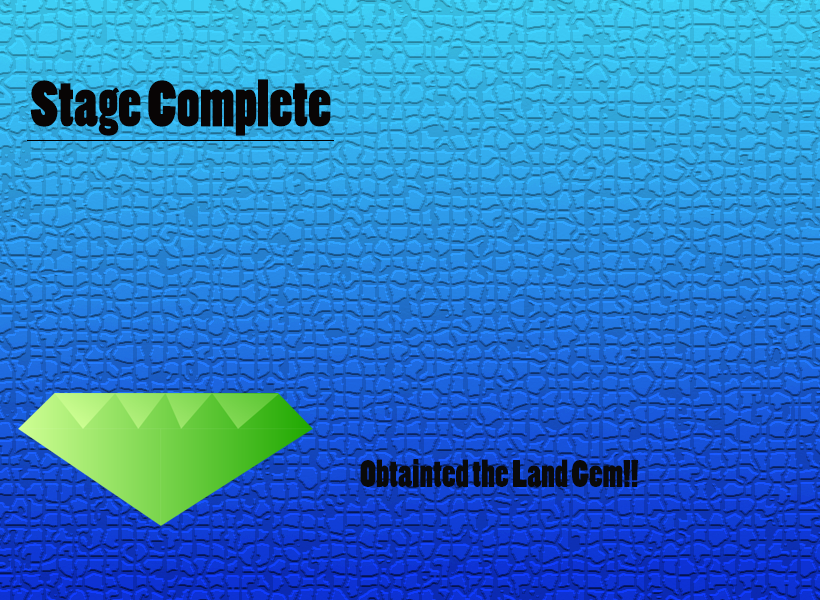
<style>
.page{position:relative;width:820px;height:600px}
.page>*{position:absolute;margin:0}
.t1{font:61.7px "PoplarStd";color:#080505}
.t2{font:36px "PoplarStd";color:#0a0a0a}
.t3{font:36px "PoplarStd";color:#a40a0a}
</style>
<div class="page">
<p class="t1" style="left:30px;top:79px;width:301px;height:57px">Stage Complete</p>
<p class="t2" style="left:360px;top:459px;width:278px;height:28px"><span class="t3">                            </span>                               Obtainted the Land Gem!!</p>
</div>
